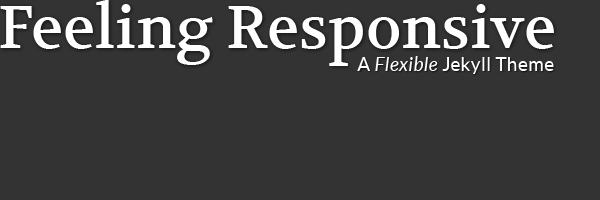
<style>
.page{position:relative;width:600px;height:200px;background:#333333}
.page>*{position:absolute;margin:0}
.t1{font:60px "Volkhov-Regular";color:#ffffff}
.t2{font:19px "Lato-Regular";letter-spacing:0.01em;color:#ffffff}
.t3{font:19px "Lato-Italic";letter-spacing:0.01em;color:#ffffff}
</style>
<div class="page">
<p class="t1" style="left:0px;top:0px;width:554px;height:66px">Feeling Responsive</p>
<p class="t2" style="left:357px;top:56px;width:197px;height:18px">A <span class="t3">Flexible </span>Jekyll Theme</p>
</div>
